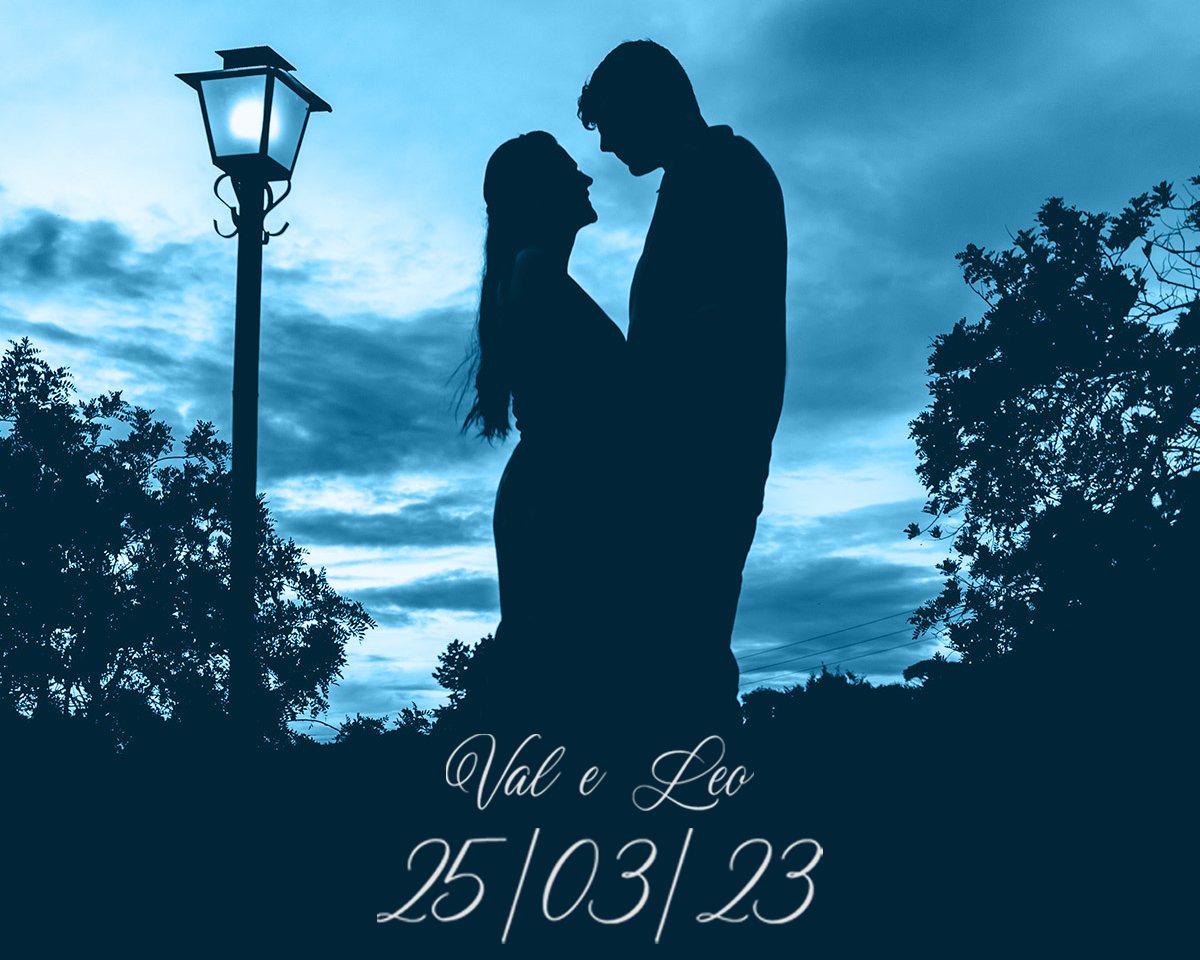
<style>
.page{position:relative;width:1200px;height:960px;background:#012437}
.page>*{position:absolute;margin:0}
.t1{font:82.1px "Westwood-Studio";color:#e7e4e4}
.t2{font:143.8px "Westwood-Studio";color:#e7e4e4}
</style>
<div class="page">
<p class="t1" style="left:446px;top:734px;width:308px;height:77px">Val e Leo</p>
<p class="t2" style="left:377px;top:828px;width:446px;height:116px">25/03/23</p>
</div>
